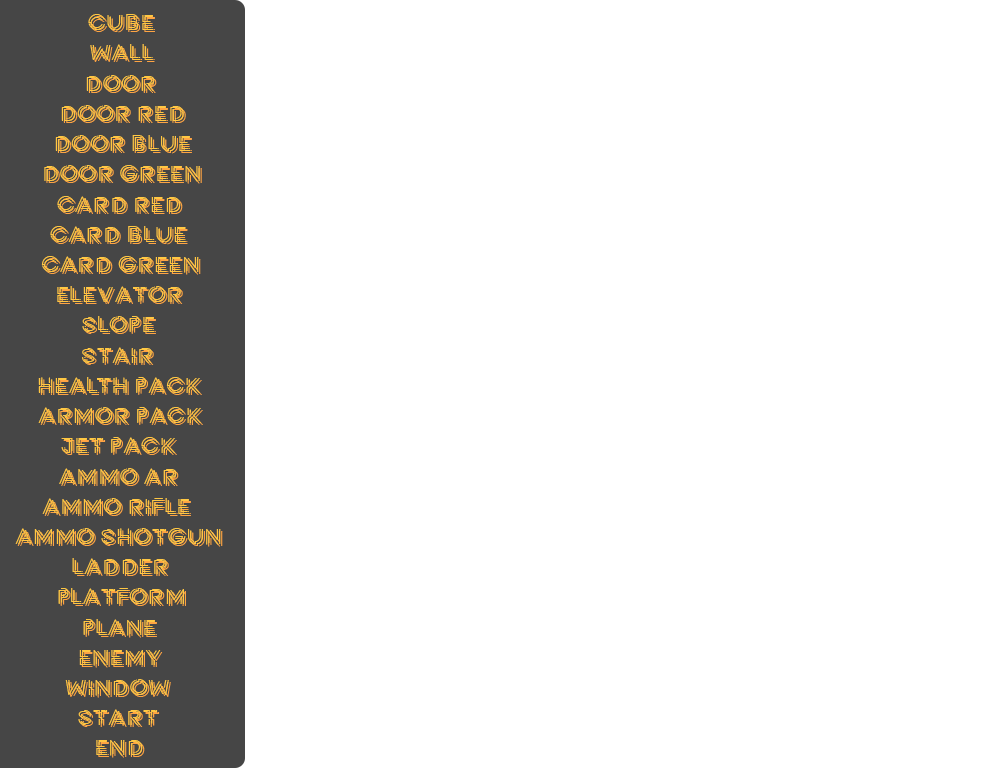
<style>
.page{position:relative;width:990px;height:768px;background:#ffffff}
.page>*{position:absolute;margin:0}
.t1{font:22.4px "Potra";color:#ffc843;scale:1.16 1}
</style>
<div class="page">
<p class="t1" style="left:88px;top:14px;width:65px;height:17px">CUBE</p>
<p class="t1" style="left:90px;top:44px;width:63px;height:16px">WALL</p>
<p class="t1" style="left:86px;top:75px;width:69px;height:16px">DOOR</p>
<p class="t1" style="left:61px;top:105px;width:123px;height:16px">DOOR RED</p>
<p class="t1" style="left:55px;top:135px;width:135px;height:17px">DOOR BLUE</p>
<p class="t1" style="left:44px;top:165px;width:156px;height:17px">DOOR GREEN</p>
<p class="t1" style="left:57px;top:196px;width:124px;height:16px">CARD RED</p>
<p class="t1" style="left:50px;top:226px;width:136px;height:17px">CARD BLUE</p>
<p class="t1" style="left:41px;top:256px;width:158px;height:17px">CARD GREEN</p>
<p class="t1" style="left:57px;top:286px;width:124px;height:16px">ELEVATOR</p>
<p class="t1" style="left:82px;top:316px;width:72px;height:16px">SLOPE</p>
<p class="t1" style="left:82px;top:347px;width:70px;height:16px">STAIR</p>
<p class="t1" style="left:38px;top:377px;width:162px;height:16px">HEALTH PACK</p>
<p class="t1" style="left:38px;top:407px;width:163px;height:16px">ARMOR PACK</p>
<p class="t1" style="left:61px;top:437px;width:114px;height:16px">JET PACK</p>
<p class="t1" style="left:59px;top:468px;width:118px;height:16px">AMMO AR</p>
<p class="t1" style="left:42px;top:498px;width:147px;height:16px">AMMO RIFLE</p>
<p class="t1" style="left:15px;top:528px;width:206px;height:17px">AMMO SHOTGUN</p>
<p class="t1" style="left:72px;top:558px;width:95px;height:16px">LADDER</p>
<p class="t1" style="left:58px;top:588px;width:126px;height:16px">PLATFORM</p>
<p class="t1" style="left:83px;top:619px;width:72px;height:17px">PLANE</p>
<p class="t1" style="left:79px;top:650px;width:82px;height:16px">ENEMY</p>
<p class="t1" style="left:65px;top:679px;width:104px;height:17px">WINDOW</p>
<p class="t1" style="left:78px;top:709px;width:80px;height:16px">START</p>
<p class="t1" style="left:96px;top:740px;width:47px;height:16px">END</p>
</div>
